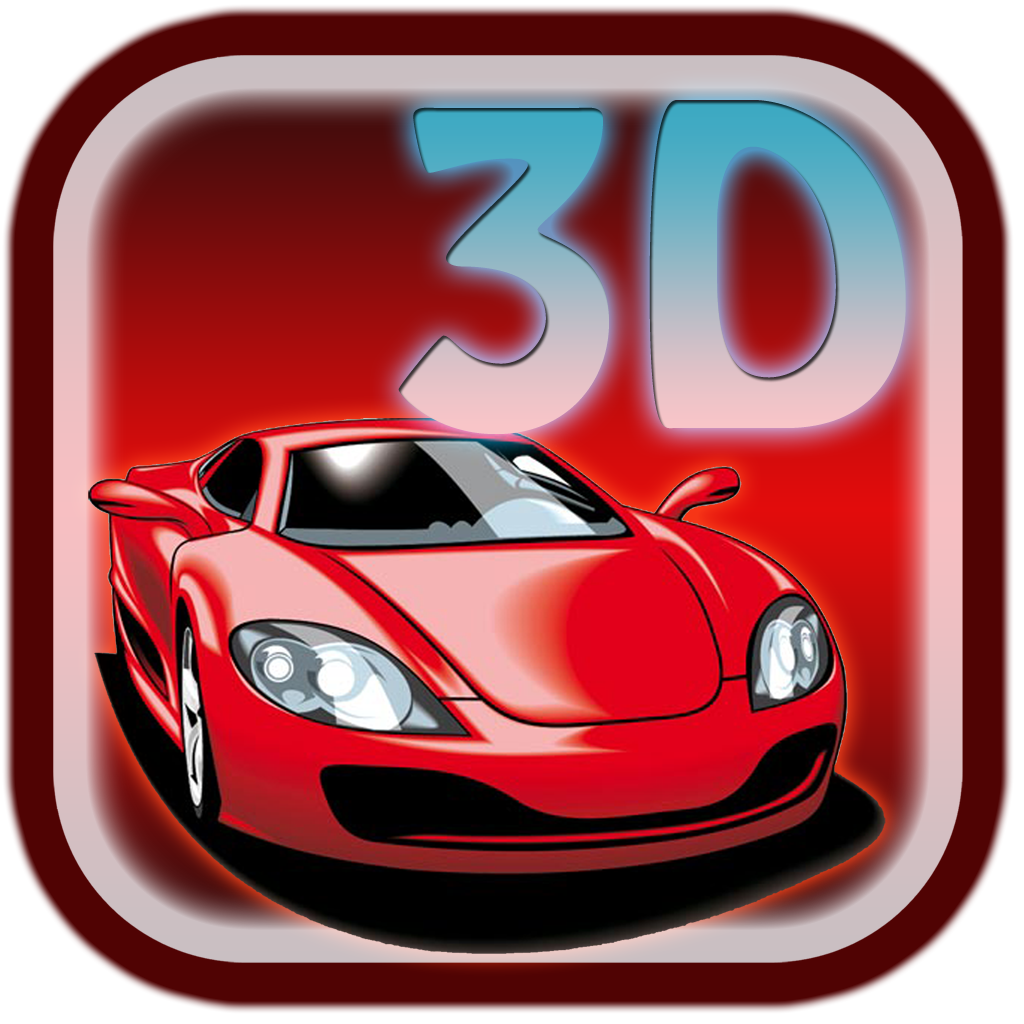
<style>
.page{position:relative;width:1024px;height:1024px}
.page>*{position:absolute;margin:0}
.t1{font:394.6px "HoboStd";scale:1.09 1}
</style>
<div class="page">
<p class="t1" style="left:398px;top:100px;width:508px;height:334px">3D</p>
</div>
